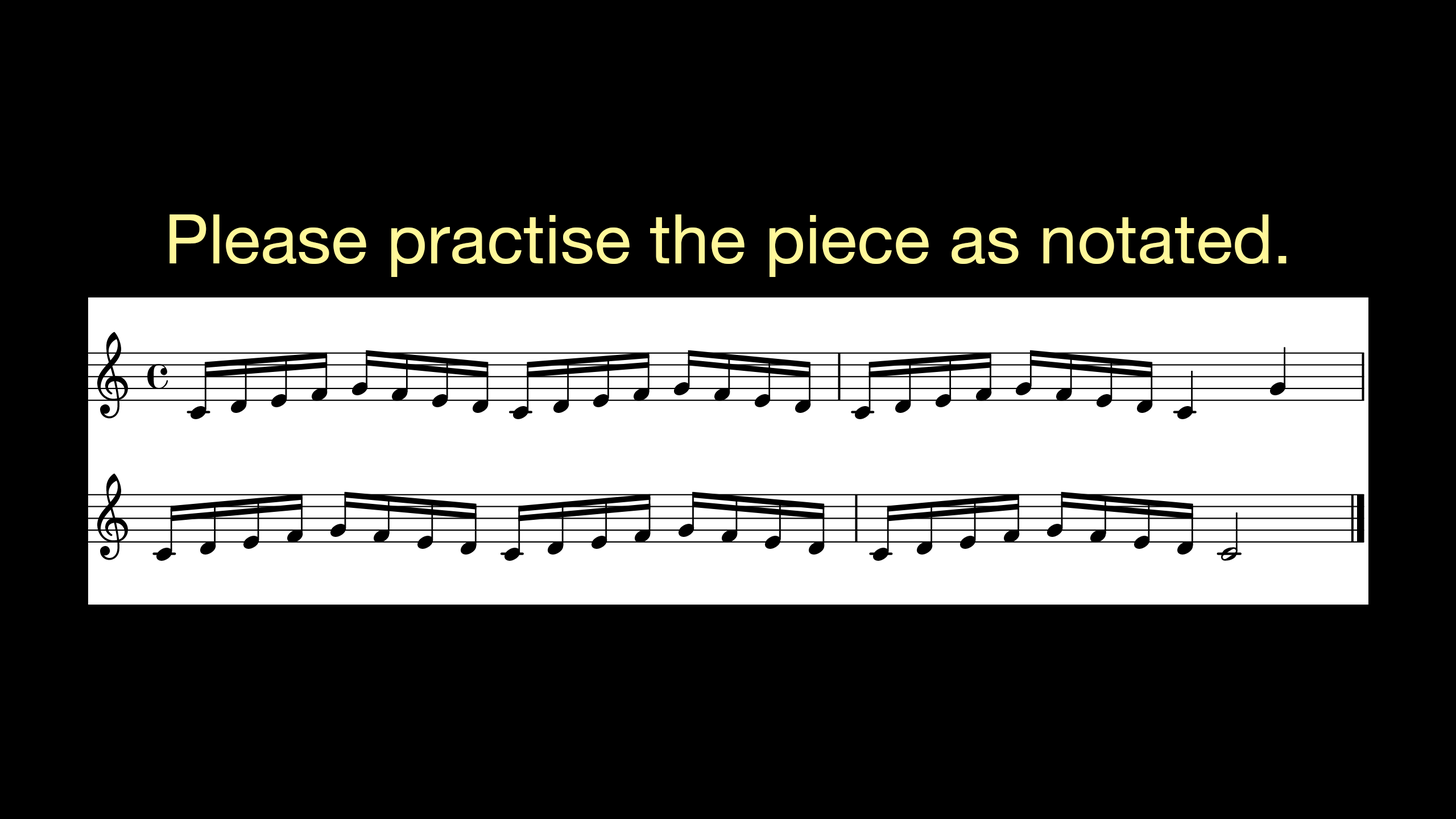
<style>
.page{position:relative;width:1456px;height:819px;background:#000000}
.page>*{position:absolute;margin:0}
.t1{font:68.2px "HelveticaNeue";color:#fff799}
</style>
<div class="page">
<p class="t1" style="left:169px;top:214px;width:1117px;height:63px">Please practise the piece as notated.</p>
</div>
